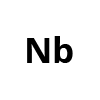
<style>
.page{position:relative;width:100px;height:100px;background:#ffffff}
.page>*{position:absolute;margin:0}
.t1{font:35px "OpenSans-Bold";color:#000000}
</style>
<div class="page">
<p class="t1" style="left:27px;top:36px;width:46px;height:27px">Nb</p>
</div>
